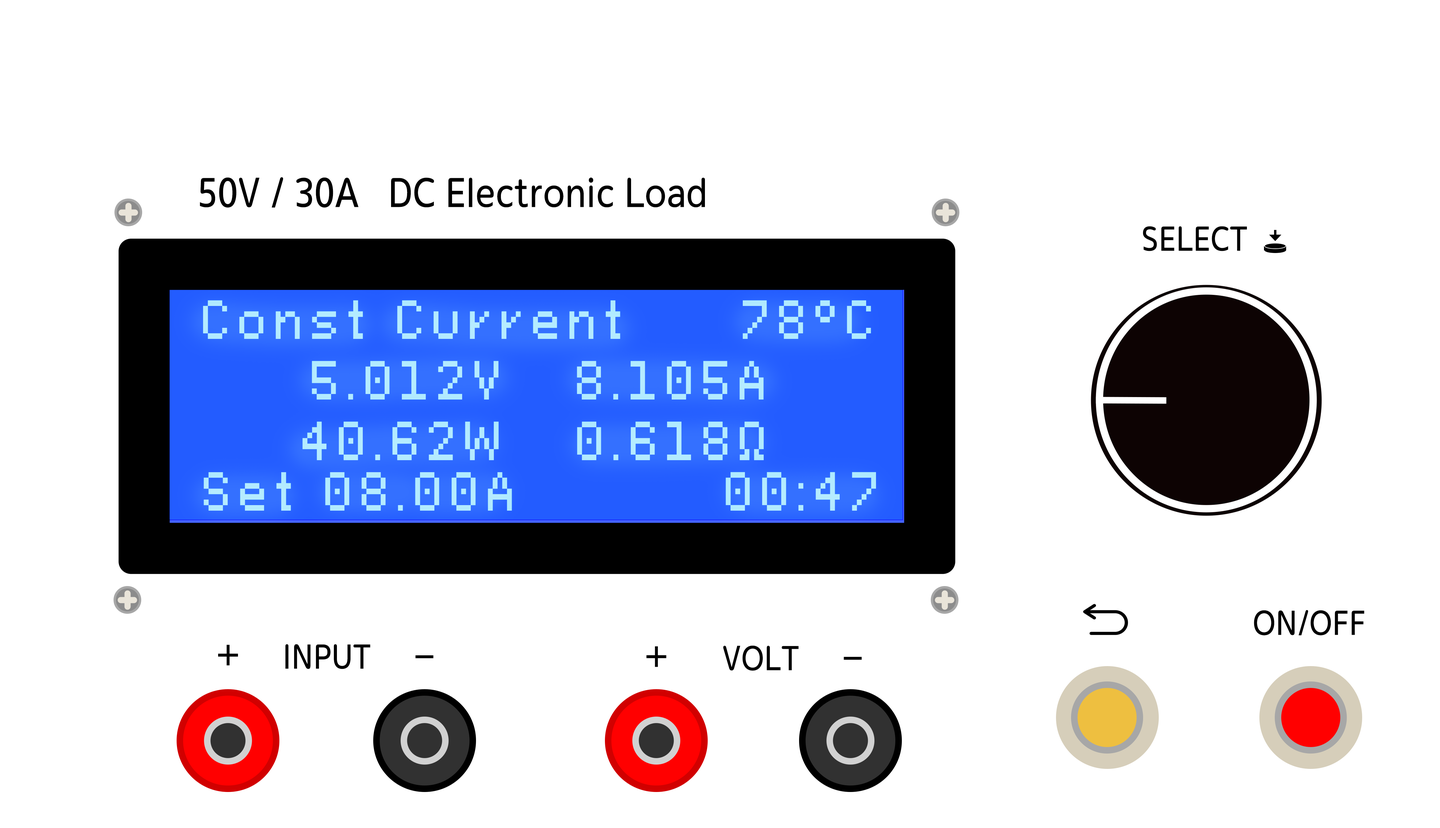
<style>
.page{position:relative;width:1440px;height:828px;background:#ffffff}
.page>*{position:absolute;margin:0}
.t1{font:59.3px "Termtem-Regular";color:#000000;scale:0.87 1}
.t2{font:49.4px "Termtem-Regular";color:#000000;scale:0.87 1}
.t3{font:49.4px "PixeloidSans";letter-spacing:0.18em;color:#c6e9ff;scale:0.87 1}
</style>
<div class="page">
<p class="t1" style="left:200px;top:177px;width:505px;height:31px">50V / 30A   DC Electronic Load</p>
<p class="t2" style="left:1143px;top:226px;width:104px;height:25px">SELECT</p>
<p class="t3" style="left:203px;top:300px;width:668px;height:39px">Const Current     78°C</p>
<p class="t3" style="left:312px;top:361px;width:452px;height:38px">5.012V   8.105A</p>
<p class="t3" style="left:303px;top:421px;width:461px;height:39px">40.62W   0.618Ω</p>
<p class="t3" style="left:204px;top:472px;width:308px;height:39px">Set 08.00A</p>
<p class="t3" style="left:726px;top:472px;width:150px;height:39px">00:47</p>
<p class="t2" style="left:1254px;top:610px;width:111px;height:25px">ON/OFF</p>
<p class="t2" style="left:285px;top:644px;width:86px;height:25px">INPUT</p>
<p class="t2" style="left:723px;top:645px;width:76px;height:26px">VOLT</p>
</div>
